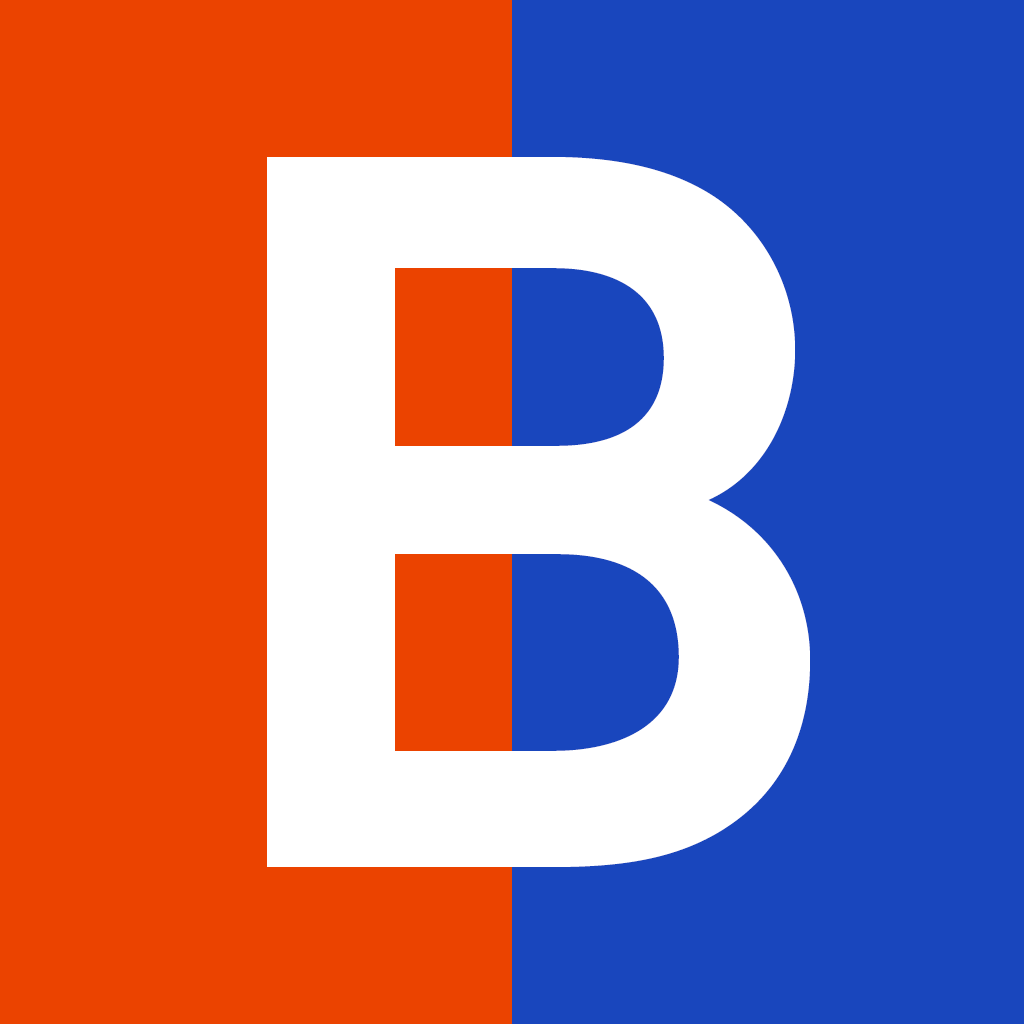
<style>
.page{position:relative;width:1024px;height:1024px;background:#eb4300}
.page>*{position:absolute;margin:0}
.t1{font:1000px "AkkuratPro-Bold";letter-spacing:0.05em;color:#ffffff}
</style>
<div class="page">
<p class="t1" style="left:267px;top:157px;width:543px;height:710px">B</p>
</div>
